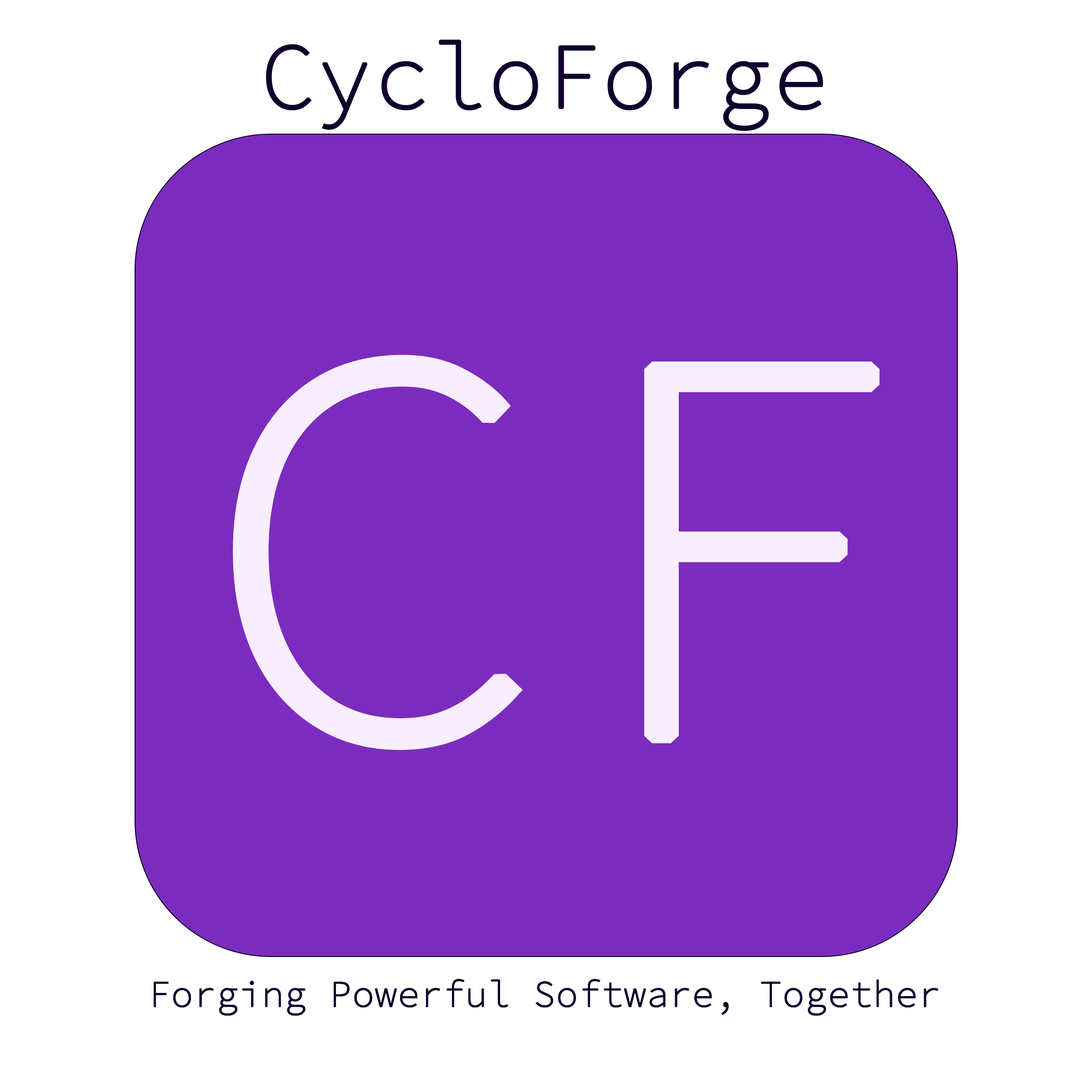
<style>
.page{position:relative;width:1092px;height:1092px;background:#7b2cbf}
.page>*{position:absolute;margin:0}
.t1{font:92.7px "SourceCodeRoman-ExtraLight";color:#10002b;font-weight:bold}
.t2{font:555.6px "SourceCodeRoman-ExtraLight";color:#f9eeff;font-weight:bold;scale:1.04 1}
.t3{font:36.7px "SourceCodeRoman-ExtraLight";color:#10002b;font-weight:bold}
</style>
<div class="page">
<p class="t1" style="left:266px;top:40px;width:557px;height:91px">CycloForge</p>
<p class="t2" style="left:233px;top:355px;width:647px;height:395px">CF</p>
<p class="t3" style="left:154px;top:979px;width:784px;height:37px">Forging Powerful Software, Together</p>
<p class="t3" style="left:154px;top:979px;width:784px;height:37px">Forging Powerful Software, Together</p>
</div>
